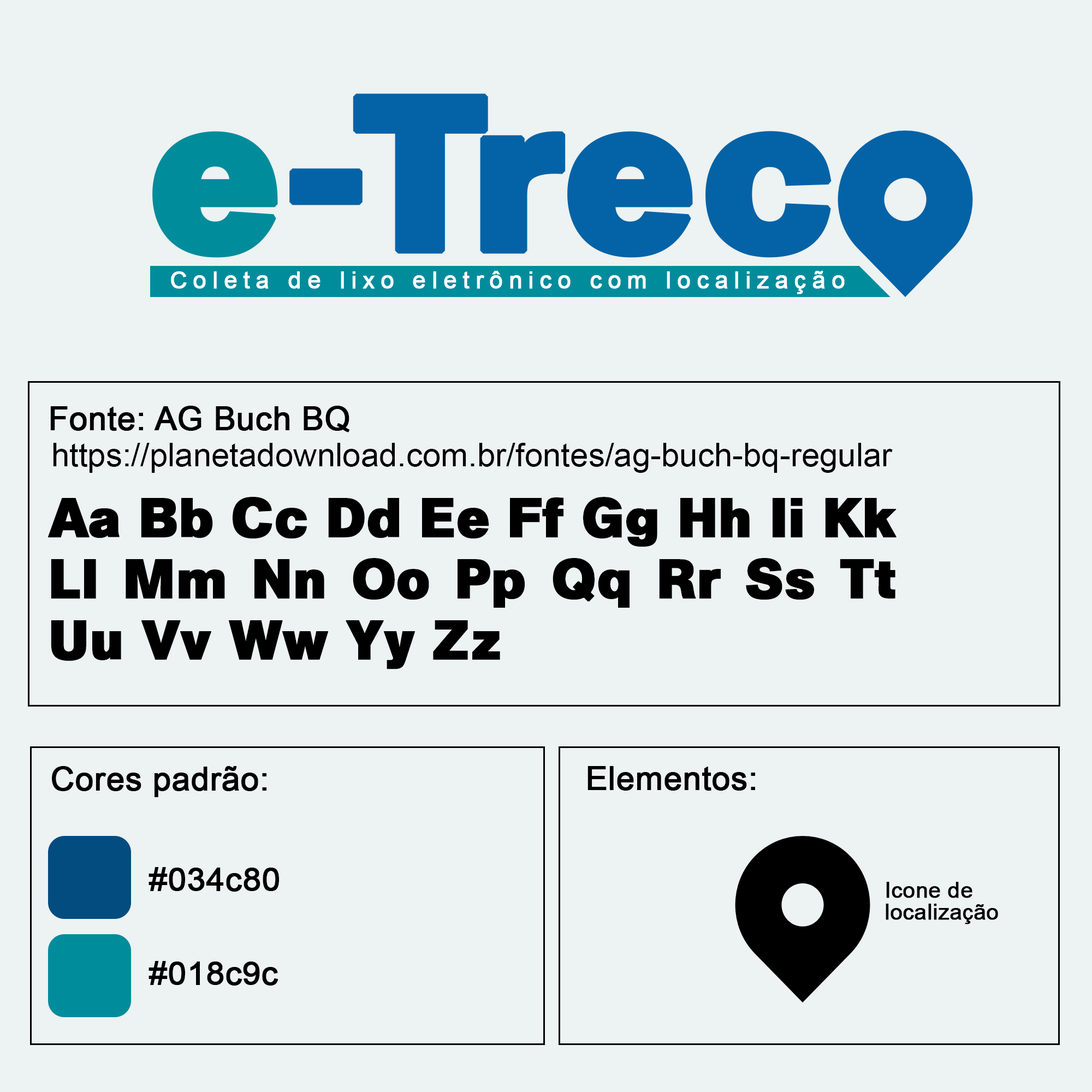
<style>
.page{position:relative;width:1092px;height:1092px;background:#edf2f2}
.page>*{position:absolute;margin:0}
.t1{font:23.5px "ArialMT";letter-spacing:0.24em;color:#ffffff;font-weight:bold}
.t2{font:32.8px "ArialMT";color:#000000;font-weight:bold}
.t3{font:32.8px "ArialMT";color:#000000}
.t4{font:54.6px/61.2px "AGBuchBQ-Bold";color:#000000;font-weight:bold}
.t5{font:21.8px/21.8px "ArialMT";color:#000000;font-weight:bold}
</style>
<div class="page">
<p class="t1" style="left:171px;top:271px;width:674px;height:23px">Coleta de lixo eletrônico com localização</p>
<p class="t2" style="left:50px;top:406px;width:299px;height:26px">Fonte: AG Buch BQ</p>
<p class="t3" style="left:53px;top:443px;width:840px;height:30px">https://planetadownload.com.br/fontes/ag-buch-bq-regular</p>
<p class="t4" style="left:48px;top:497px;width:849px;height:172px;text-align:justify">Aa Bb Cc Dd Ee Ff Gg Hh Ii Kk Ll Mm Nn Oo Pp Qq Rr Ss Tt Uu Vv Ww Yy Zz</p>
<p class="t2" style="left:52px;top:766px;width:214px;height:31px">Cores padrão:</p>
<p class="t2" style="left:587px;top:766px;width:168px;height:25px">Elementos:</p>
<p class="t2" style="left:149px;top:867px;width:130px;height:25px">#034c80</p>
<p class="t5" style="left:886px;top:882px;width:112px;height:42px">Icone de <br>localização</p>
<p class="t2" style="left:149px;top:961px;width:129px;height:25px">#018c9c</p>
</div>
